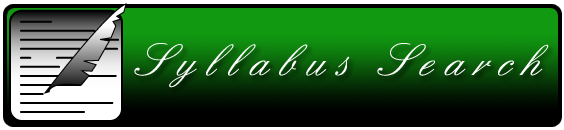
<style>
.page{position:relative;width:564px;height:130px}
.page>*{position:absolute;margin:0}
.t1{font:48px "English";letter-spacing:0.2em;color:#ffffff}
</style>
<div class="page">
<p class="t1" style="left:134px;top:43px;width:415px;height:45px">Syllabus Search</p>
</div>
